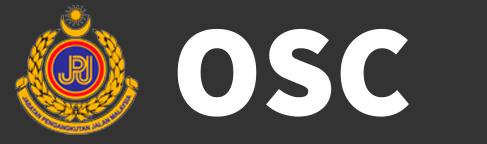
<style>
.page{position:relative;width:487px;height:144px;background:#333333}
.page>*{position:absolute;margin:0}
.t1{font:130px "SourceSansPro-Black";color:#ffffff}
</style>
<div class="page">
<p class="t1" style="left:177px;top:28px;width:232px;height:89px">OSC</p>
</div>
